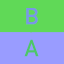
<style>
.page{position:relative;width:64px;height:64px;background:#60d957}
.page>*{position:absolute;margin:0}
.t1{font:23px "DIN-1451-Mittelschrift-Regular";color:#7a96e6}
.t2{font:23px "DIN-1451-Mittelschrift-Regular";color:#4ec668}
</style>
<div class="page">
<p class="t1" style="left:26px;top:8px;width:12px;height:17px">B</p>
<p class="t2" style="left:24px;top:39px;width:15px;height:18px">A</p>
</div>
